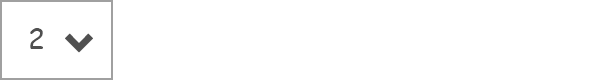
<style>
.page{position:relative;width:600px;height:80px;background:#ffffff}
.page>*{position:absolute;margin:0}
.t1{font:28px "ComicSansMS";color:#505050}
.t2{font:28px "SSStandard";color:#505050}
</style>
<div class="page">
<p class="t1" style="left:30px;top:28px;width:13px;height:21px">2</p>
<p class="t2" style="left:65px;top:33px;width:28px;height:20px">navigatedown</p>
</div>
